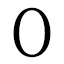
<style>
.page{position:relative;width:64px;height:64px;background:#ffffff}
.page>*{position:absolute;margin:0}
.t1{font:62px "BIZ-UDMincho-Medium";letter-spacing:-0.2em;color:#000000;scale:1.13 1}
</style>
<div class="page">
<p class="t1" style="left:13px;top:7px;width:38px;height:51px">０</p>
</div>
